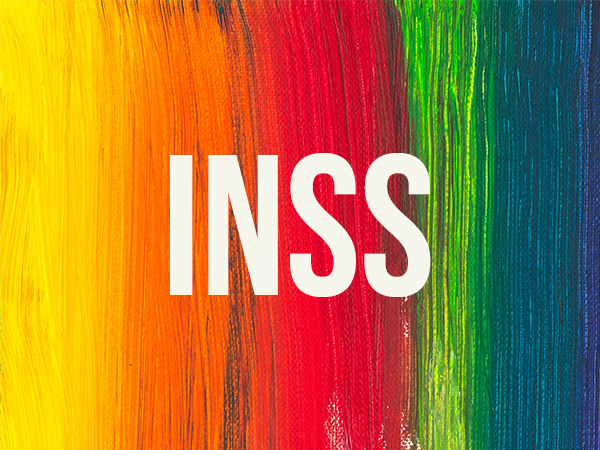
<style>
.page{position:relative;width:600px;height:450px}
.page>*{position:absolute;margin:0}
.t1{font:200px "BebasNeue-Regular";color:#f6f6ed}
</style>
<div class="page">
<p class="t1" style="left:170px;top:153px;width:261px;height:144px">Inss</p>
</div>
